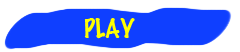
<style>
.page{position:relative;width:240px;height:52px;background:#0f3fff}
.page>*{position:absolute;margin:0}
.t1{font:24px "MarkerFelt-Thin";color:#ffff00}
</style>
<div class="page">
<p class="t1" style="left:84px;top:18px;width:51px;height:21px">PLAY</p>
</div>
